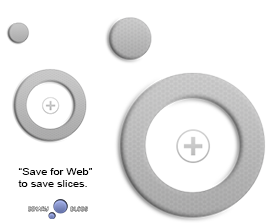
<style>
.page{position:relative;width:272px;height:224px;background:#ffffff}
.page>*{position:absolute;margin:0}
.t1{font:10px "ArialMT";color:#000000;scale:1.1 1}
</style>
<div class="page">
<p class="t1" style="left:18px;top:168px;width:74px;height:19px">“Save for Web” <br>to save slices.</p>
</div>
